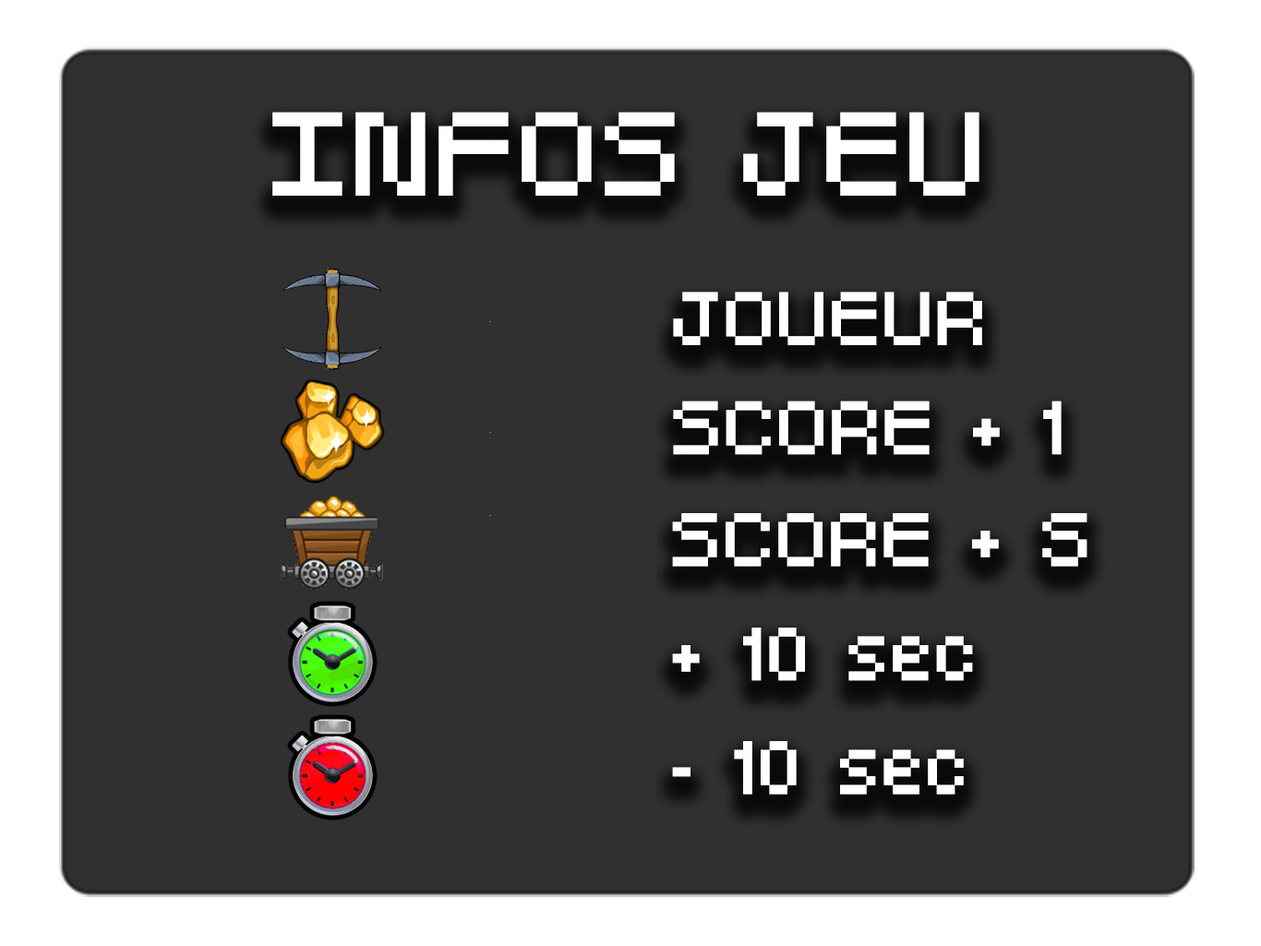
<style>
.page{position:relative;width:1261px;height:946px;background:#303030}
.page>*{position:absolute;margin:0}
.t1{font:110.7px "GoldyRoundNormal";color:#ffffff}
.t2{font:70.4px "GoldyRoundNormal";color:#ffffff}
</style>
<div class="page">
<p class="t1" style="left:272px;top:112px;width:707px;height:84px">INFOS JEU</p>
<p class="t2" style="left:673px;top:292px;width:309px;height:53px">JOUEUR</p>
<p class="t2" style="left:673px;top:401px;width:388px;height:54px">SCORE + 1</p>
<p class="t2" style="left:672px;top:513px;width:415px;height:54px">SCORE + 5</p>
<p class="t2" style="left:672px;top:628px;width:301px;height:53px">+ 10 sec</p>
<p class="t2" style="left:672px;top:741px;width:291px;height:54px">- 10 sec</p>
</div>
